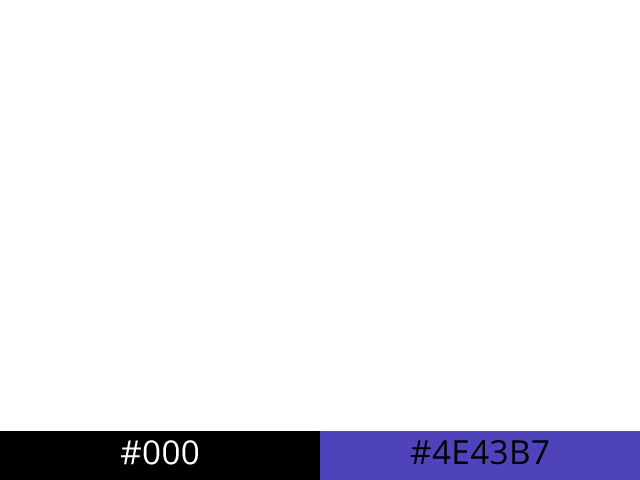
<style>
.page{position:relative;width:640px;height:480px;background:#ffffff}
.page>*{position:absolute;margin:0}
.t1{font:33.3px "OpenSans-Regular";letter-spacing:0.01em;color:#ffffff}
.t2{font:33.3px "OpenSans-Regular";letter-spacing:0.01em;color:#000000}
</style>
<div class="page">
<p class="t1" style="left:121px;top:440px;width:77px;height:25px">#000</p>
<p class="t2" style="left:410px;top:440px;width:139px;height:25px">#4E43B7</p>
</div>
